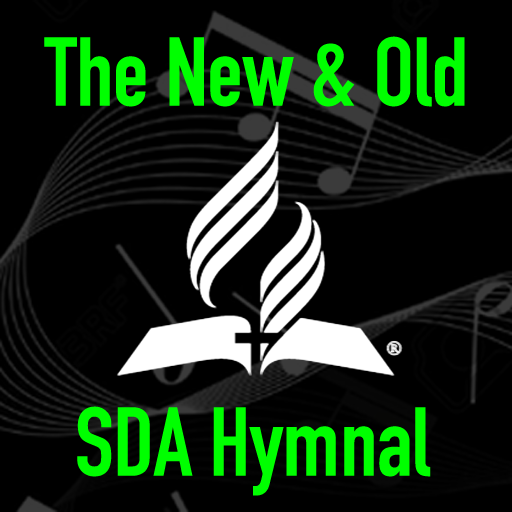
<style>
.page{position:relative;width:512px;height:512px;background:#000000}
.page>*{position:absolute;margin:0}
.t1{font:96.1px "DINCondensed-Bold";color:#00ff00}
</style>
<div class="page">
<p class="t1" style="left:44px;top:36px;width:421px;height:71px">The New &amp; Old</p>
<p class="t1" style="left:77px;top:406px;width:354px;height:90px">SDA Hymnal</p>
</div>
